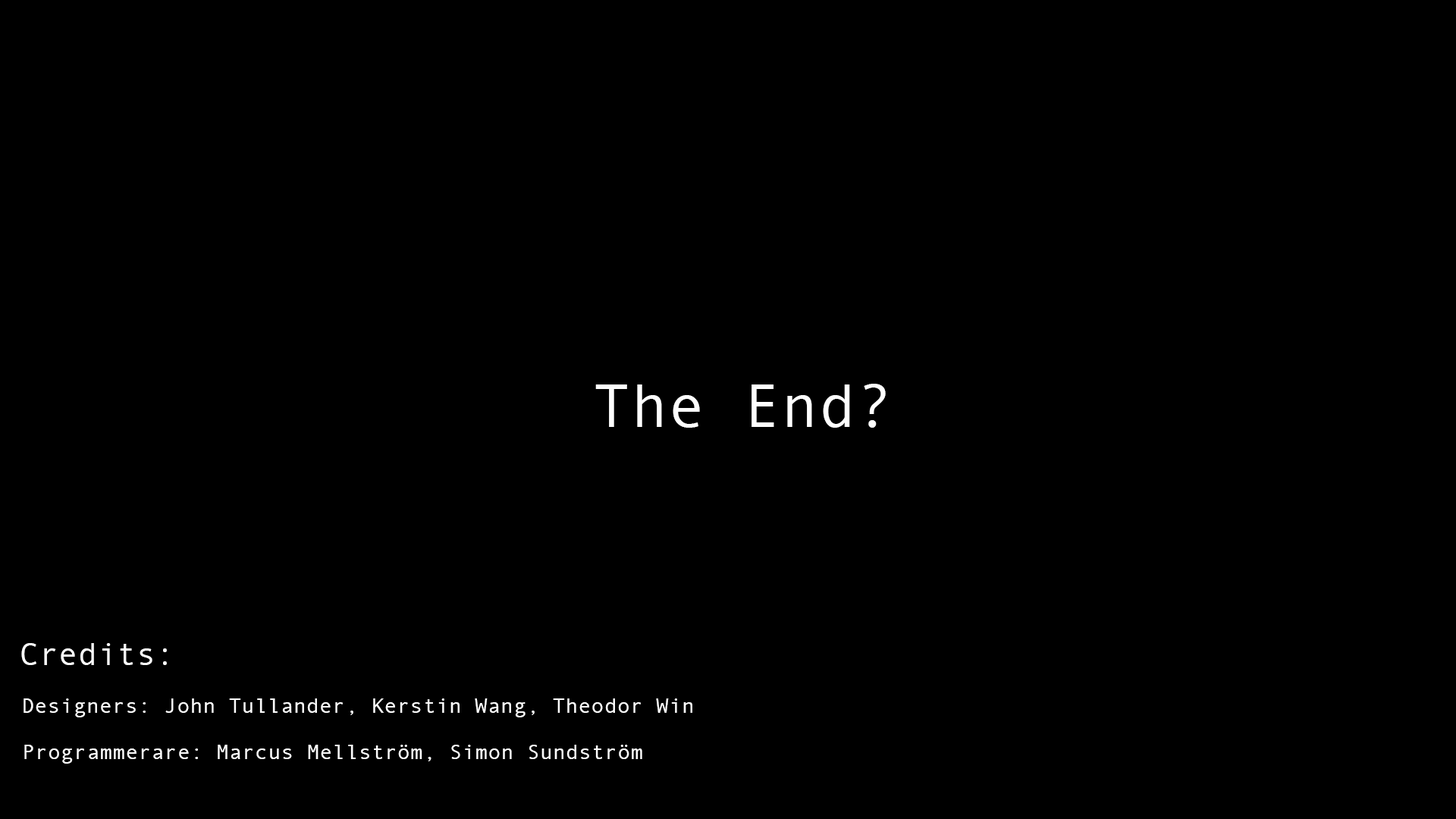
<style>
.page{position:relative;width:1456px;height:819px;background:#000000}
.page>*{position:absolute;margin:0}
.t1{font:105.8px "AndaleMono";letter-spacing:0.01em;color:#fefefe}
.t2{font:54.6px "AndaleMono";letter-spacing:0.01em;color:#fefefe}
.t3{font:36.4px "AndaleMono";letter-spacing:0.01em;color:#fefefe}
</style>
<div class="page">
<p class="t1" style="left:595px;top:384px;width:291px;height:44px">The End?</p>
<p class="t2" style="left:21px;top:643px;width:146px;height:22px">Credits:</p>
<p class="t3" style="left:24px;top:698px;width:668px;height:19px">Designers: John Tullander, Kerstin Wang, Theodor Win</p>
<p class="t3" style="left:24px;top:745px;width:618px;height:19px">Programmerare: Marcus Mellström, Simon Sundström</p>
</div>
